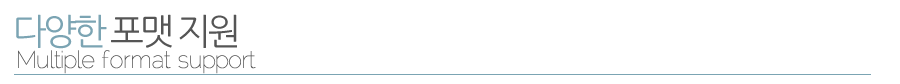
<style>
.page{position:relative;width:900px;height:84px;background:#ffffff}
.page>*{position:absolute;margin:0}
.t1{font:36px "NanumGothic";letter-spacing:-0.1em;color:#555555}
.t2{font:36px "NanumGothic";letter-spacing:-0.1em;color:#7ba4b3}
.t3{font:24px "Raleway-Thin";letter-spacing:-0.025em;color:#555555}
</style>
<div class="page">
<p class="t1" style="left:16px;top:14px;width:221px;height:35px"><span class="t2">다양한 </span>포맷 지원</p>
<p class="t3" style="left:18px;top:50px;width:238px;height:24px">Multiple format support</p>
</div>
